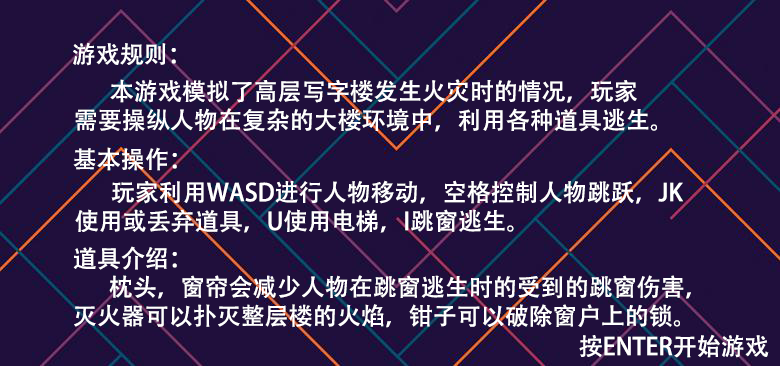
<style>
.page{position:relative;width:780px;height:366px;background:#200f3c}
.page>*{position:absolute;margin:0}
.t1{font:24px "AdobeHeitiStd-Regular";color:#ffffff}
.t2{font:24px/0px "AdobeHeitiStd-Regular";color:#ffffff}
</style>
<div class="page">
<p class="t1" style="left:73px;top:42px;width:103px;height:24px">游戏规则：</p>
<p class="t1" style="left:75px;top:79px;width:582px;height:53px"><span class="t2"> </span>本游戏模拟了高层写字楼发生火灾时的情况，玩家<br>需要操纵人物在复杂的大楼环境中，利用各种道具逃生。</p>
<p class="t1" style="left:73px;top:147px;width:104px;height:24px">基本操作：</p>
<p class="t1" style="left:75px;top:180px;width:608px;height:53px">玩家利用WASD进行人物移动，空格控制人物跳跃，JK<br>使用或丢弃道具，U使用电梯，I跳窗逃生。</p>
<p class="t1" style="left:73px;top:246px;width:618px;height:82px">道具介绍：<br> 枕头，窗帘会减少人物在跳窗逃生时的受到的跳窗伤害，<br>灭火器可以扑灭整层楼的火焰，钳子可以破除窗户上的锁。</p>
<p class="t1" style="left:579px;top:334px;width:190px;height:24px">按ENTER开始游戏</p>
</div>
